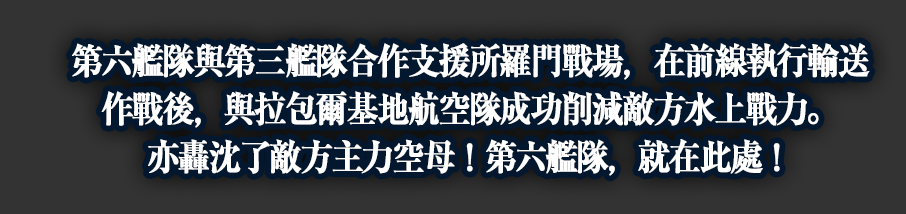
<style>
.page{position:relative;width:906px;height:214px;background:#333333}
.page>*{position:absolute;margin:0}
.t1{font:36px/48px "RyuminPro-Bold";letter-spacing:-0.08em;color:#ffffff;font-weight:bold;scale:0.9 1}
</style>
<div class="page">
<p class="t1" style="left:72px;top:43px;width:798px;height:133px;text-align:center">第六艦隊與第三艦隊合作支援所羅門戰場，在前線執行輸送<br>作戰後，與拉包爾基地航空隊成功削減敵方水上戰力。<br>亦轟沈了敵方主力空母！第六艦隊，就在此處！</p>
</div>
